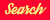
<style>
.page{position:relative;width:50px;height:20px;background:#fb042d}
.page>*{position:absolute;margin:0}
.t1{font:11.3px "Streetwear";color:#f2f688;scale:0.93 1}
</style>
<div class="page">
<p class="t1" style="left:5px;top:3px;width:42px;height:12px">Search</p>
</div>
